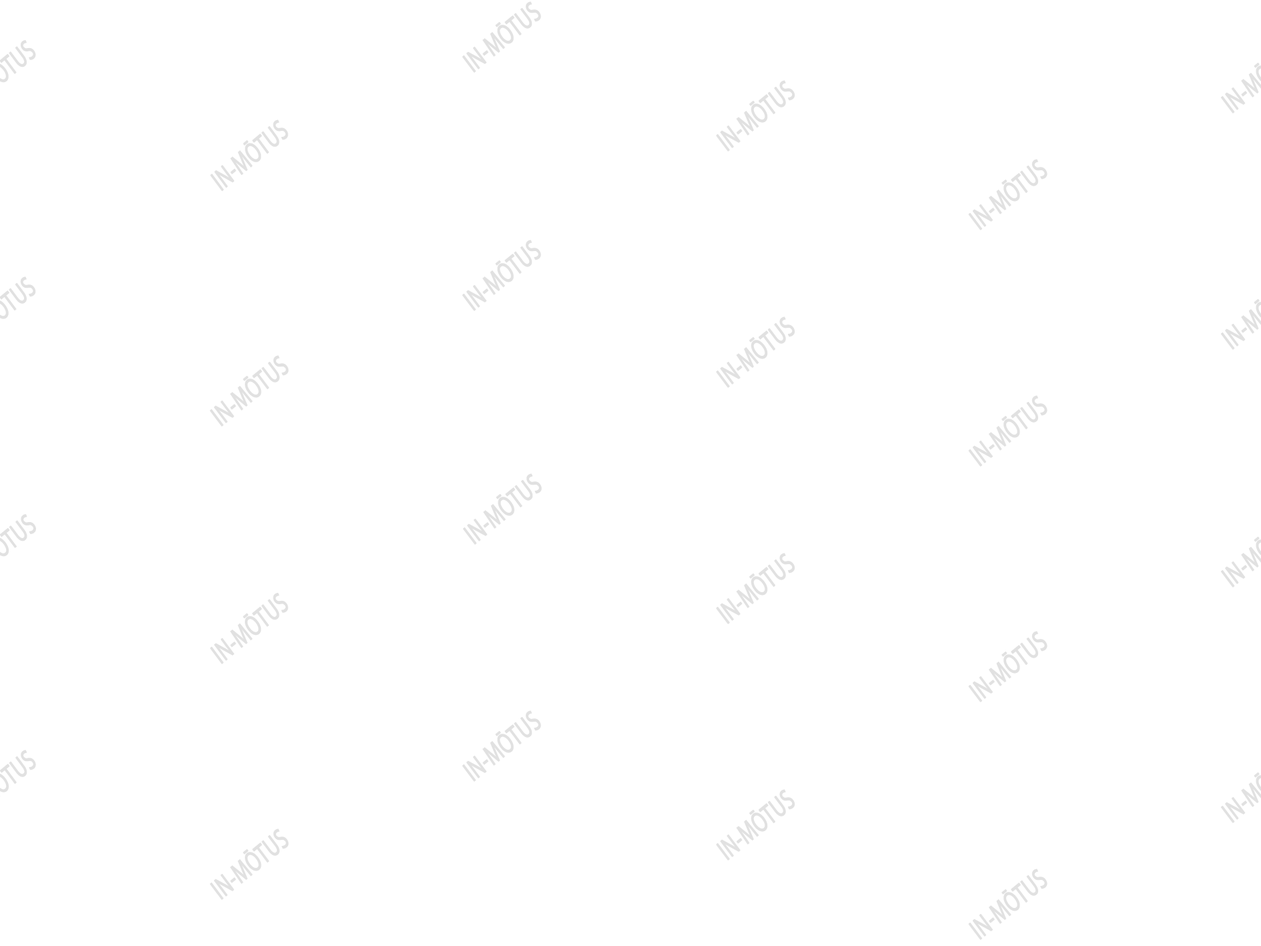
<style>
.page{position:relative;width:1261px;height:946px;background:#ffffff}
.page>*{position:absolute;margin:0}
.t1{font:28.5px "MyriadPro-Regular";color:#e1e1e1;font-weight:bold;scale:0.71 1}
.t2{font:28.4px "MyriadPro-Regular";color:#e1e1e1;font-weight:bold;scale:0.7 1}
</style>
<div class="page">
<p class="t1" style="left:462px;top:1px;width:79px;height:72px;rotate:-39deg">IN-MŌTUS</p>
<p class="t1" style="left:716px;top:80px;width:79px;height:71px;rotate:-39deg">IN-MŌTUS</p>
<p class="t2" style="left:210px;top:119px;width:78px;height:73px;rotate:-40deg">IN-MŌTUS</p>
<p class="t1" style="left:968px;top:159px;width:80px;height:71px;rotate:-39deg">IN-MŌTUS</p>
<p class="t1" style="left:462px;top:240px;width:79px;height:71px;rotate:-39deg">IN-MŌTUS</p>
<p class="t1" style="left:716px;top:316px;width:79px;height:72px;rotate:-39deg">IN-MŌTUS</p>
<p class="t1" style="left:210px;top:355px;width:79px;height:71px;rotate:-39deg">IN-MŌTUS</p>
<p class="t1" style="left:968px;top:395px;width:80px;height:71px;rotate:-39deg">IN-MŌTUS</p>
<p class="t1" style="left:463px;top:473px;width:79px;height:71px;rotate:-39deg">IN-MŌTUS</p>
<p class="t1" style="left:716px;top:552px;width:79px;height:72px;rotate:-39deg">IN-MŌTUS</p>
<p class="t2" style="left:210px;top:593px;width:78px;height:71px;rotate:-40deg">IN-MŌTUS</p>
<p class="t1" style="left:968px;top:631px;width:80px;height:71px;rotate:-39deg">IN-MŌTUS</p>
<p class="t1" style="left:462px;top:710px;width:79px;height:71px;rotate:-39deg">IN-MŌTUS</p>
<p class="t1" style="left:716px;top:789px;width:79px;height:71px;rotate:-39deg">IN-MŌTUS</p>
<p class="t1" style="left:210px;top:828px;width:79px;height:71px;rotate:-39deg">IN-MŌTUS</p>
<p class="t1" style="left:968px;top:868px;width:80px;height:72px;rotate:-39deg">IN-MŌTUS</p>
</div>
